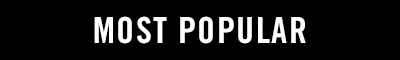
<style>
.page{position:relative;width:400px;height:60px;background:#000000}
.page>*{position:absolute;margin:0}
.t1{font:36px "TradeGothic-BoldCondTwenty";letter-spacing:0.04em;color:#ffffff;text-transform:uppercase}
</style>
<div class="page">
<p class="t1" style="left:94px;top:16px;width:212px;height:28px">Most Popular</p>
</div>
